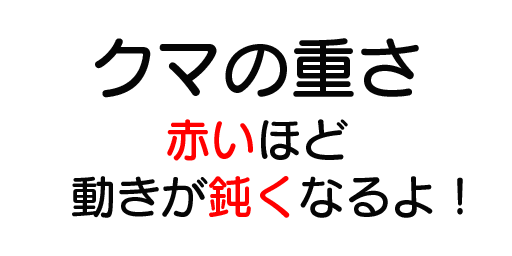
<style>
.page{position:relative;width:512px;height:256px;background:#ffffff}
.page>*{position:absolute;margin:0}
.t1{font:66.7px "SeuratProN-DB";color:#060606}
.t2{font:45.8px/75px "SeuratProN-DB";color:#060606}
.t3{font:66.7px/75px "SeuratProN-DB";color:#060606}
.t4{font:45.8px/75px "SeuratProN-DB";color:#ff0000}
</style>
<div class="page">
<p class="t1" style="left:95px;top:38px;width:324px;height:60px">クマの重さ</p>
<p class="t2" style="left:72px;top:119px;width:391px;height:99px"><span class="t3">     </span><span class="t4">赤い</span>ほど<br>動きが<span class="t4">鈍く</span>なるよ！</p>
</div>
